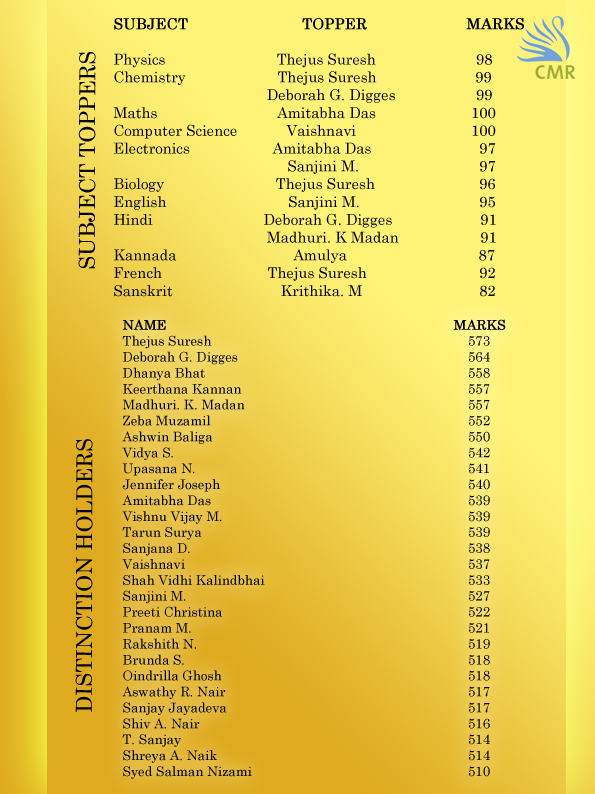
<style>
.page{position:relative;width:595px;height:794px}
.page>*{position:absolute;margin:0}
.t1{font:14.8px "CenturySchoolbook";color:#000000}
.t2{font:14.8px "CenturySchoolbook";color:#000000;font-weight:bold}
.t3{font:22px "CenturySchoolbook";color:#000000}
.t4{font:13.3px "CenturySchoolbook";color:#000000}
.t5{font:13.3px "CenturySchoolbook";color:#000000;font-weight:bold}
</style>
<div class="page">
<p class="t1" style="left:113px;top:18px;width:411px;height:279px"><span class="t2">SUBJECT                       TOPPER                    MARKS<br></span><br>Physics                    Thejus Suresh                  98<br>Chemistry             Thejus Suresh                        99<br>                               Deborah G. Digges                 99<br>Maths                             Amitabha Das                       100<br>Computer Science       Vaishnavi                        100<br>Electronics                  Amitabha Das                         97<br>                                    Sanjini M.                         97<br>Biology                          Thejus Suresh                         96<br>English                             Sanjini M.                         95<br>Hindi                       Deborah G. Digges                  91<br>                               Madhuri. K Madan                  91<br>Kannada                       Amulya                                87<br>French                        Thejus Suresh                         92<br>Sanskrit                    Krithika. M                         82</p>
<p class="t3" style="left:78px;top:51px;width:18px;height:218px;rotate:-90deg">SUBJECT TOPPERS</p>
<p class="t4" style="left:122px;top:319px;width:384px;height:460px"><span class="t5">NAME              MARKS<br></span>Thejus Suresh          573<br>Deborah G. Digges         564<br>Dhanya Bhat          558<br>Keerthana Kannan         557<br>Madhuri. K. Madan         557<br>Zeba Muzamil          552<br>Ashwin Baliga          550<br>Vidya S.            542<br>Upasana N.           541<br>Jennifer Joseph          540<br>Amitabha Das          539<br>Vishnu Vijay M.          539<br>Tarun Surya           539<br>Sanjana D.           538<br>Vaishnavi           537<br>Shah Vidhi Kalindbhai        533<br>Sanjini M.           527<br>Preeti Christina          522<br>Pranam M.           521<br>Rakshith N.           519<br>Brunda S.           518<br>Oindrilla Ghosh          518<br>Aswathy R. Nair          517<br>Sanjay Jayadeva          517<br>Shiv A. Nair           516<br>T. Sanjay           514<br>Shreya A. Naik          514<br>Syed Salman Nizami         510</p>
<p class="t3" style="left:75px;top:439px;width:18px;height:273px;rotate:-90deg">DISTINCTION HOLDERS</p>
</div>
